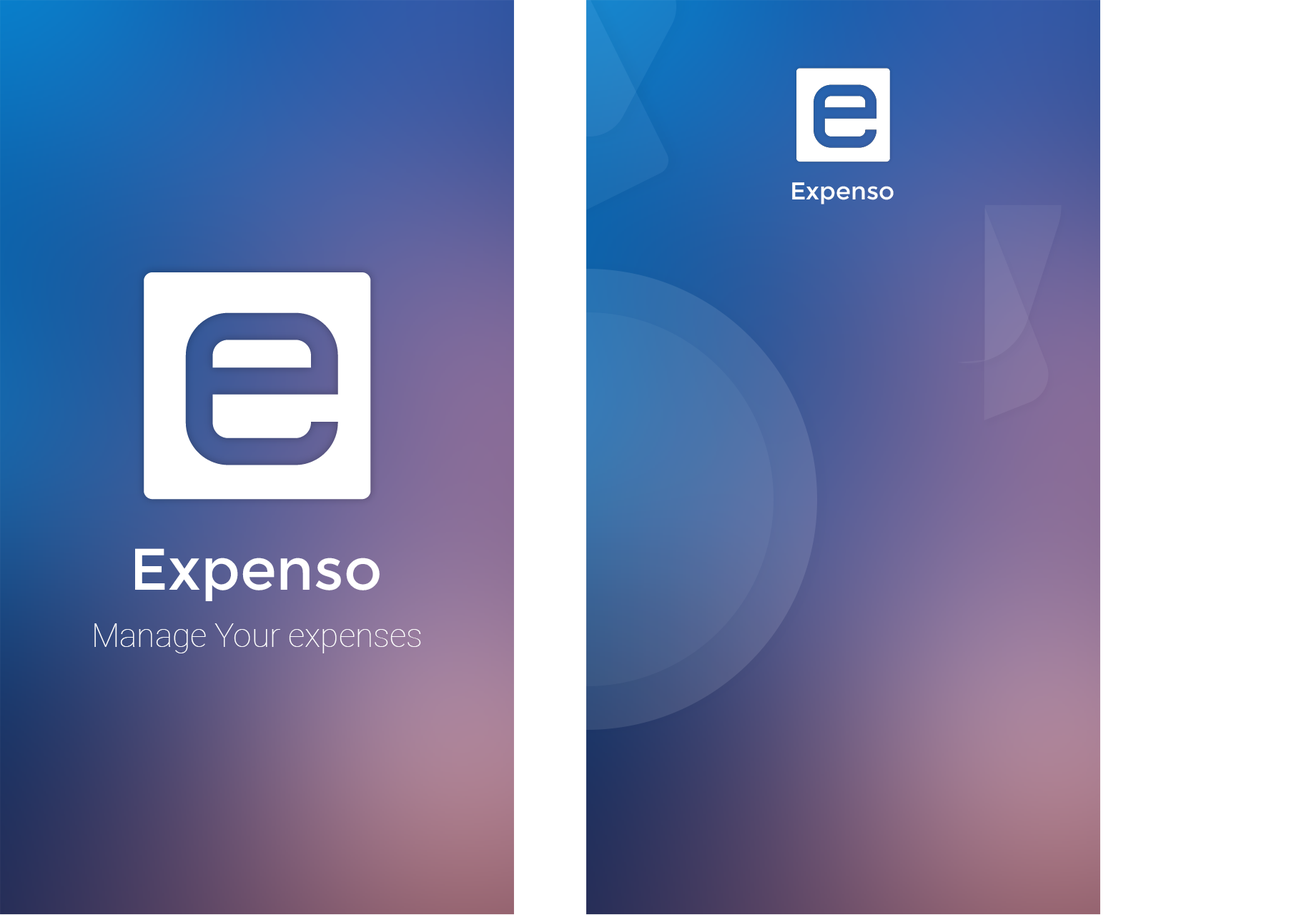
<style>
.page{position:relative;width:1304px;height:915px;background:#ffffff}
.page>*{position:absolute;margin:0}
.t1{font:24.2px "Montserrat-Regular";color:#ffffff}
.t2{font:58.6px "Montserrat-Regular";color:#ffffff}
.t3{font:32.9px "Roboto-Thin";color:#ffffff}
</style>
<div class="page">
<p class="t1" style="left:792px;top:182px;width:101px;height:22px">Expenso</p>
<p class="t2" style="left:135px;top:548px;width:244px;height:53px">Expenso</p>
<p class="t3" style="left:94px;top:623px;width:327px;height:30px">Manage Your expenses</p>
</div>
